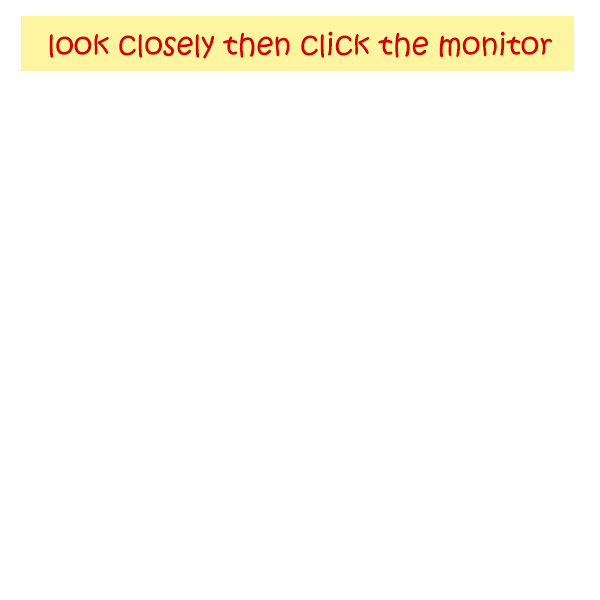
<style>
.page{position:relative;width:600px;height:600px;background:#ffffff}
.page>*{position:absolute;margin:0}
.t1{font:30px "KristenITC-Regular";color:#d50000}
</style>
<div class="page">
<p class="t1" style="left:49px;top:31px;width:503px;height:28px">look closely then click the monitor</p>
</div>
